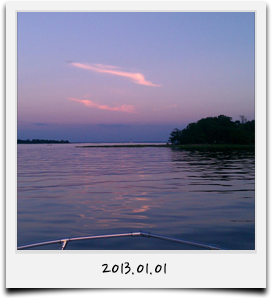
<style>
.page{position:relative;width:272px;height:298px}
.page>*{position:absolute;margin:0}
.t1{font:24px "NanumPen";color:#000000}
</style>
<div class="page">
<p class="t1" style="left:102px;top:262px;width:65px;height:13px">2013.01.01</p>
</div>
